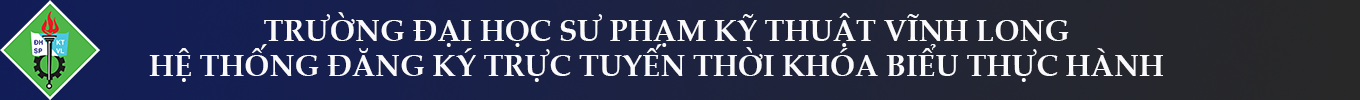
<style>
.page{position:relative;width:1360px;height:100px}
.page>*{position:absolute;margin:0}
.t1{font:30px "PalatinoLinotype-Bold";color:#fafafc}
</style>
<div class="page">
<p class="t1" style="left:264px;top:12px;width:805px;height:35px">TRƯỜNG ĐẠI HỌC SƯ PHẠM KỸ THUẬT VĨNH LONG</p>
<p class="t1" style="left:149px;top:44px;width:1014px;height:38px">HỆ THỐNG ĐĂNG KÝ TRỰC TUYẾN THỜI KHÓA BIỂU THỰC HÀNH</p>
</div>
